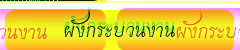
<style>
.page{position:relative;width:240px;height:50px}
.page>*{position:absolute;margin:0}
.t1{font:28px "THCharmonman"}
</style>
<div class="page">
<p class="t1" style="left:64px;top:6px;width:111px;height:27px">ผังกระบวนงาน</p>
</div>
